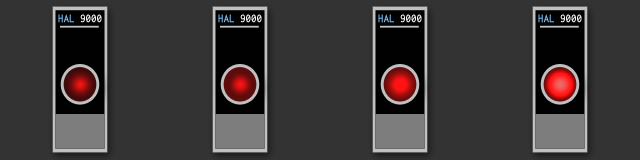
<style>
.page{position:relative;width:640px;height:160px;background:#333333}
.page>*{position:absolute;margin:0}
.t1{font:12px "Inconsolata-Regular";color:#f3f3f3;font-weight:bold;scale:0.87 1}
.t2{font:12px "Inconsolata-Regular";color:#80c1f9;font-weight:bold;scale:0.87 1}
</style>
<div class="page">
<p class="t1" style="left:58px;top:14px;width:44px;height:9px"><span class="t2">HAL</span> 9000</p>
<p class="t1" style="left:218px;top:14px;width:44px;height:9px"><span class="t2">HAL</span> 9000</p>
<p class="t1" style="left:378px;top:14px;width:44px;height:9px"><span class="t2">HAL</span> 9000</p>
<p class="t1" style="left:538px;top:14px;width:44px;height:9px"><span class="t2">HAL</span> 9000</p>
</div>
